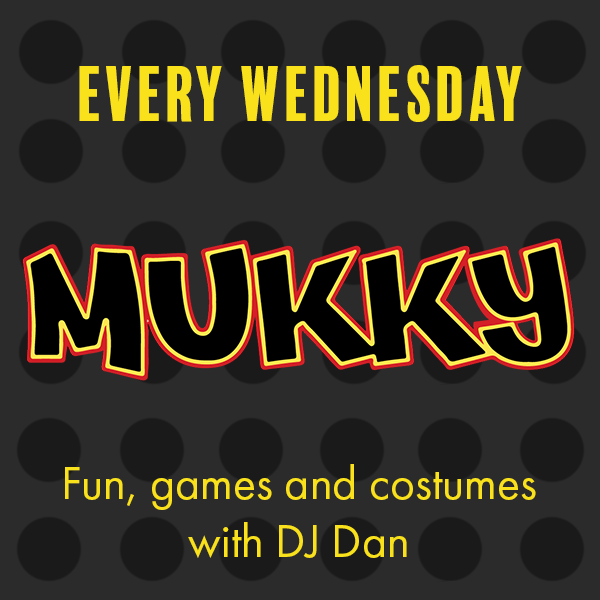
<style>
.page{position:relative;width:600px;height:600px;background:#2b2b2b}
.page>*{position:absolute;margin:0}
.t1{font:72px "BalboaPlus-Fill";color:#f9e11b}
.t2{font:48px "FuturaPT-Book";color:#f9e11b}
</style>
<div class="page">
<p class="t1" style="left:79px;top:65px;width:443px;height:57px">Every wednesday</p>
<p class="t2" style="left:65px;top:464px;width:471px;height:94px;text-align:center">Fun, games and costumes<br>with DJ Dan</p>
</div>
